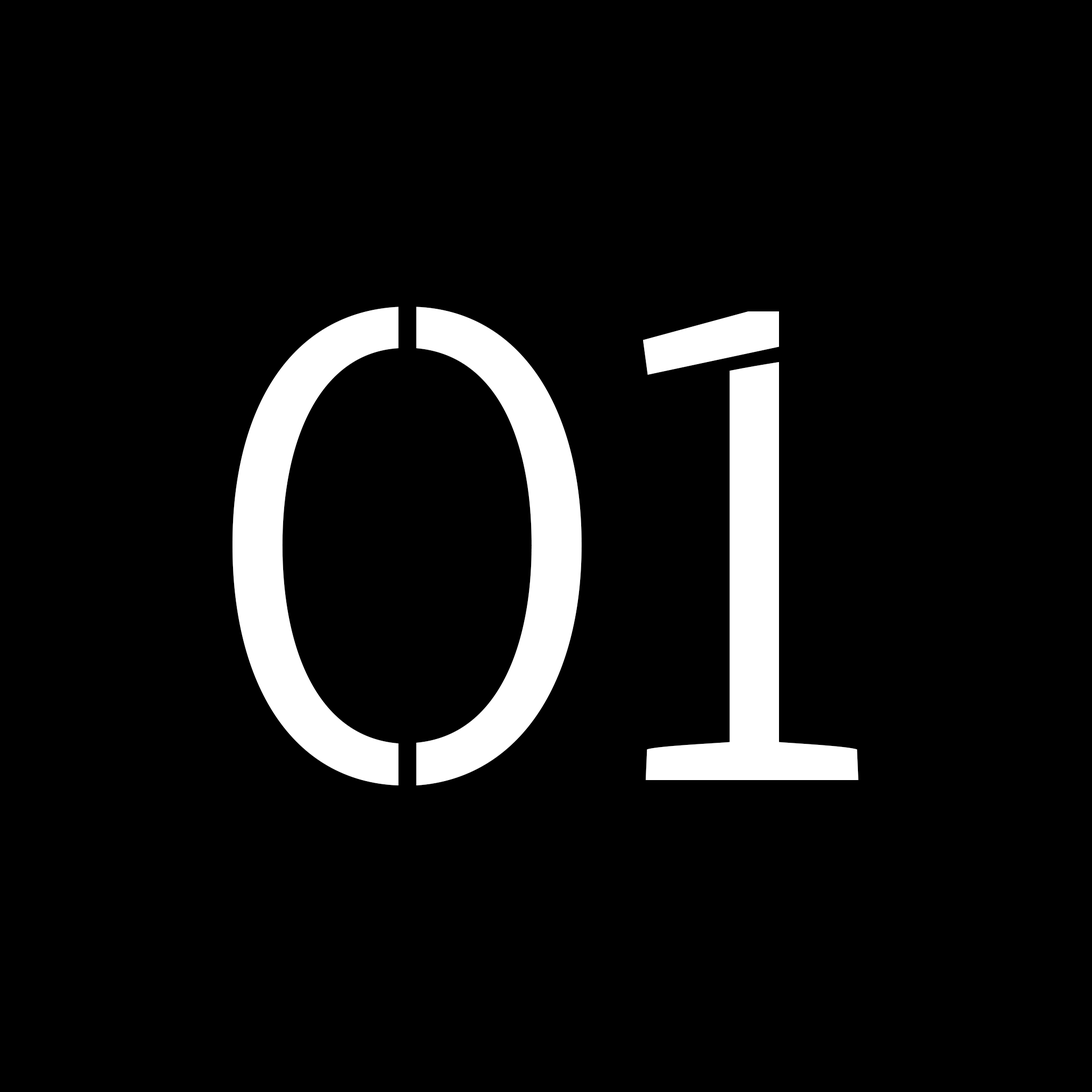
<style>
.page{position:relative;width:1092px;height:1092px;background:#000000}
.page>*{position:absolute;margin:0}
.t1{font:666.5px "AnaphoraStencil-Book";color:#ffffff}
</style>
<div class="page">
<p class="t1" style="left:232px;top:307px;width:626px;height:478px">01</p>
</div>
